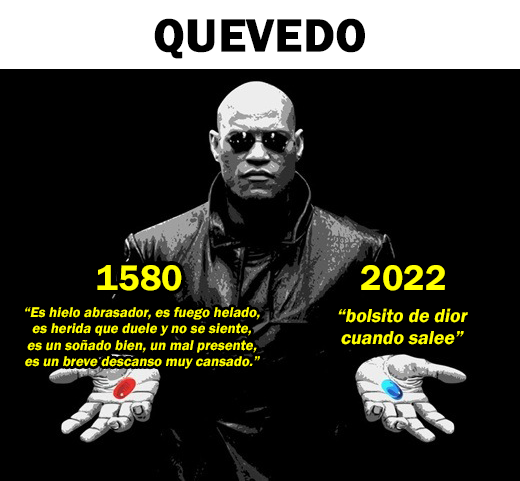
<style>
.page{position:relative;width:520px;height:481px;background:#000000}
.page>*{position:absolute;margin:0}
.t1{font:47.8px "FranklinGothic-Demi";color:#000000;font-weight:bold}
.t2{font:36.7px "FranklinGothic-Demi";color:#ffff00}
.t3{font:14.6px "FranklinGothic-Demi";color:#ffff00;font-style:italic}
.t4{font:19.6px "FranklinGothic-Demi";color:#ffff00;font-style:italic}
</style>
<div class="page">
<p class="t1" style="left:154px;top:18px;width:211px;height:41px">QUEVEDO</p>
<p class="t2" style="left:97px;top:265px;width:85px;height:26px">1580</p>
<p class="t2" style="left:361px;top:265px;width:84px;height:26px">2022</p>
<p class="t3" style="left:25px;top:307px;width:235px;height:62px;text-align:center">“Es hielo abrasador, es fuego helado,<br>es herida que duele y no se siente,<br>es un soñado bien, un mal presente,<br>es un breve descanso muy cansado.”</p>
<p class="t4" style="left:338px;top:308px;width:130px;height:37px;text-align:center">“bolsito de dior<br>cuando salee”</p>
</div>
